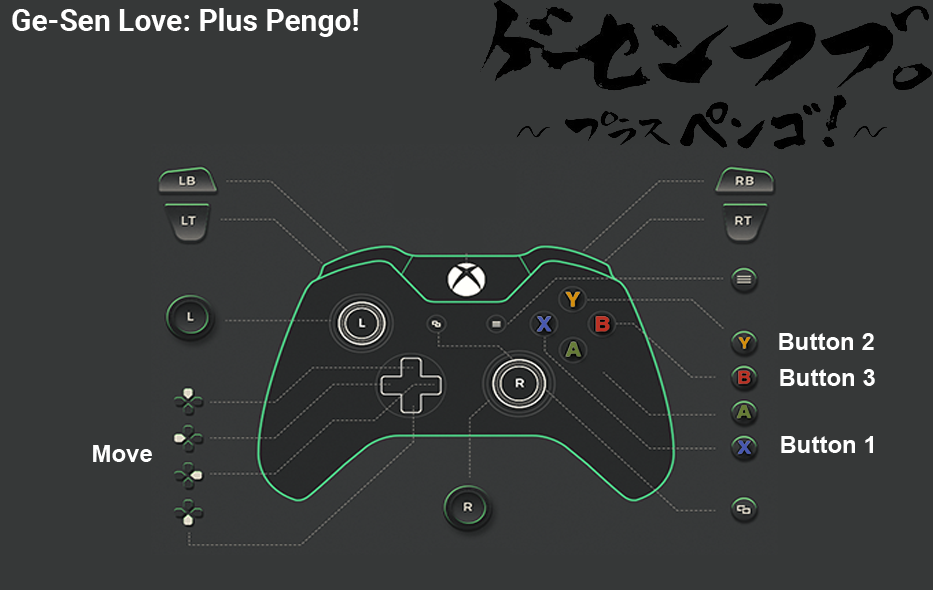
<style>
.page{position:relative;width:933px;height:590px;background:#363838}
.page>*{position:absolute;margin:0}
.t1{font:30px "Roboto-Bold";color:#ffffff}
.t2{font:24px "Arial-BoldMT";color:#fefefe}
</style>
<div class="page">
<p class="t1" style="left:12px;top:8px;width:346px;height:29px">Ge-Sen Love: Plus Pengo!</p>
<p class="t2" style="left:779px;top:333px;width:95px;height:17px">Button 2</p>
<p class="t2" style="left:780px;top:369px;width:95px;height:17px">Button 3</p>
<p class="t2" style="left:781px;top:436px;width:92px;height:17px">Button 1</p>
<p class="t2" style="left:93px;top:445px;width:59px;height:17px">Move</p>
</div>
